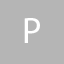
<style>
.page{position:relative;width:64px;height:64px;background:#b5b5b5}
.page>*{position:absolute;margin:0}
.t1{font:36px "MyriadPro-Regular";letter-spacing:0.05em;color:#ffffff}
</style>
<div class="page">
<p class="t1" style="left:24px;top:18px;width:16px;height:25px">P</p>
</div>
